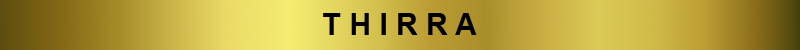
<style>
.page{position:relative;width:800px;height:50px}
.page>*{position:absolute;margin:0}
.t1{font:30px "Arial-BoldMT";color:#000000}
</style>
<div class="page">
<p class="t1" style="left:323px;top:13px;width:154px;height:22px">T H I R R A</p>
</div>
